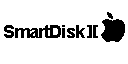
<style>
.page{position:relative;width:128px;height:64px;background:#ffffff}
.page>*{position:absolute;margin:0}
.t1{font:18px "Arial-BoldMT";letter-spacing:-0.05em;color:#000000}
</style>
<div class="page">
<p class="t1" style="left:4px;top:25px;width:92px;height:13px">SmartDisk II</p>
</div>
